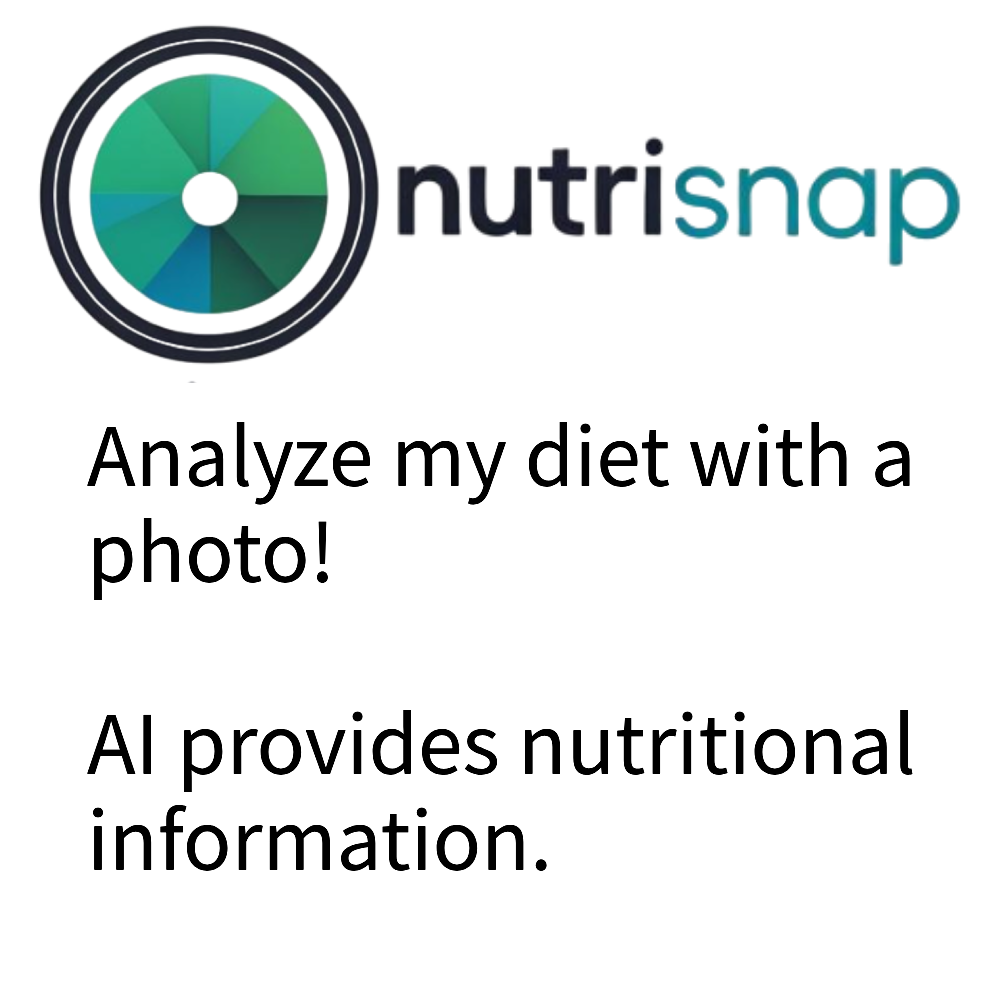
<style>
.page{position:relative;width:1000px;height:1000px;background:#ffffff}
.page>*{position:absolute;margin:0}
.t1{font:80px "NotoSansKR-Regular";color:#000000}
</style>
<div class="page">
<p class="t1" style="left:87px;top:422px;width:826px;height:449px">Analyze my diet with a photo!<br><br>AI provides nutritional information.</p>
</div>
